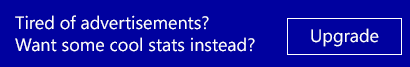
<style>
.page{position:relative;width:410px;height:67px;background:#00019f}
.page>*{position:absolute;margin:0}
.t1{font:18px "SegoeWP";color:#ffffff}
</style>
<div class="page">
<p class="t1" style="left:15px;top:15px;width:240px;height:37px">Tired of advertisements?<br>Want some cool stats instead?</p>
<p class="t1" style="left:311px;top:28px;width:68px;height:19px">Upgrade</p>
</div>
